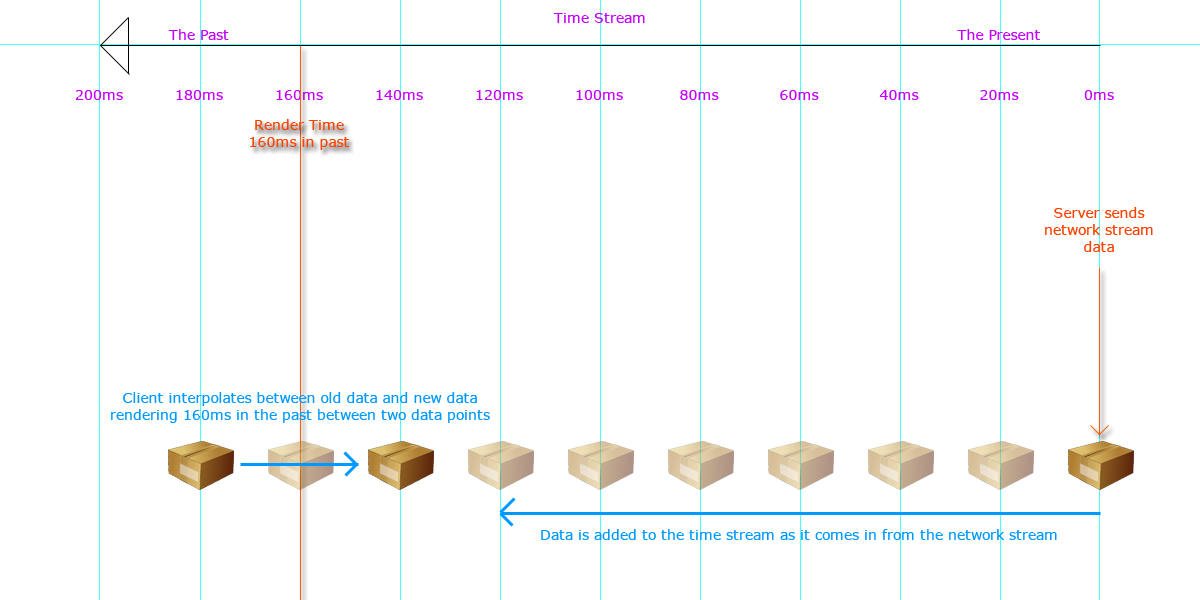
<style>
.page{position:relative;width:1200px;height:600px;background:#ffffff}
.page>*{position:absolute;margin:0}
.t1{font:14px "Verdana";color:#c600ff}
.t2{font:14px "Verdana";color:#ff4200}
.t3{font:14px "Verdana";color:#ff4100}
.t4{font:14px "Verdana";color:#0099ff}
</style>
<div class="page">
<p class="t1" style="left:553px;top:13px;width:92px;height:10px">Time Stream</p>
<p class="t1" style="left:168px;top:29px;width:61px;height:11px">The Past</p>
<p class="t1" style="left:957px;top:29px;width:83px;height:11px">The Present</p>
<p class="t1" style="left:76px;top:90px;width:47px;height:10px">200ms</p>
<p class="t1" style="left:176px;top:90px;width:47px;height:10px">180ms</p>
<p class="t1" style="left:276px;top:90px;width:47px;height:10px">160ms</p>
<p class="t1" style="left:376px;top:90px;width:47px;height:10px">140ms</p>
<p class="t1" style="left:476px;top:90px;width:47px;height:10px">120ms</p>
<p class="t1" style="left:576px;top:90px;width:47px;height:10px">100ms</p>
<p class="t1" style="left:680px;top:90px;width:39px;height:10px">80ms</p>
<p class="t1" style="left:780px;top:90px;width:39px;height:10px">60ms</p>
<p class="t1" style="left:879px;top:90px;width:40px;height:10px">40ms</p>
<p class="t1" style="left:980px;top:90px;width:39px;height:10px">20ms</p>
<p class="t1" style="left:1084px;top:90px;width:30px;height:10px">0ms</p>
<p class="t2" style="left:250px;top:119px;width:99px;height:31px;text-align:center">Render Time<br>160ms in past</p>
<p class="t3" style="left:1045px;top:207px;width:108px;height:45px;text-align:center">Server sends<br>network stream<br>data</p>
<p class="t4" style="left:111px;top:392px;width:379px;height:31px;text-align:center">Client interpolates between old data and new data<br>rendering 160ms in the past between two data points</p>
<p class="t4" style="left:541px;top:529px;width:516px;height:11px">Data is added to the time stream as it comes in from the network stream</p>
</div>
